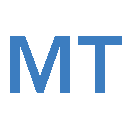
<style>
.page{position:relative;width:128px;height:128px;background:#ffffff}
.page>*{position:absolute;margin:0}
.t1{font:80px "Avenir-Heavy";color:#3c7dc0}
</style>
<div class="page">
<p class="t1" style="left:10px;top:36px;width:112px;height:57px">MT</p>
</div>
